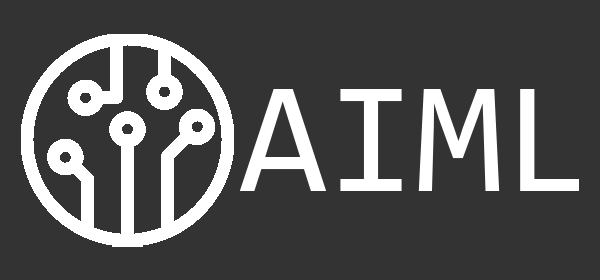
<style>
.page{position:relative;width:600px;height:280px;background:#333333}
.page>*{position:absolute;margin:0}
.t1{font:159.7px "Consolas";color:#ffffff}
</style>
<div class="page">
<p class="t1" style="left:239px;top:89px;width:340px;height:102px">AIML</p>
</div>
